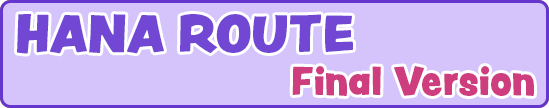
<style>
.page{position:relative;width:549px;height:108px;background:#d5c4fb}
.page>*{position:absolute;margin:0}
.t1{font:55.7px "PeachyKeenJF";color:#7147d3}
.t2{font:42.8px "PeachyKeenJF";color:#ce3e7e}
</style>
<div class="page">
<p class="t1" style="left:17px;top:14px;width:337px;height:40px">HANA ROUTE</p>
<p class="t2" style="left:292px;top:66px;width:242px;height:30px">Final Version</p>
</div>
